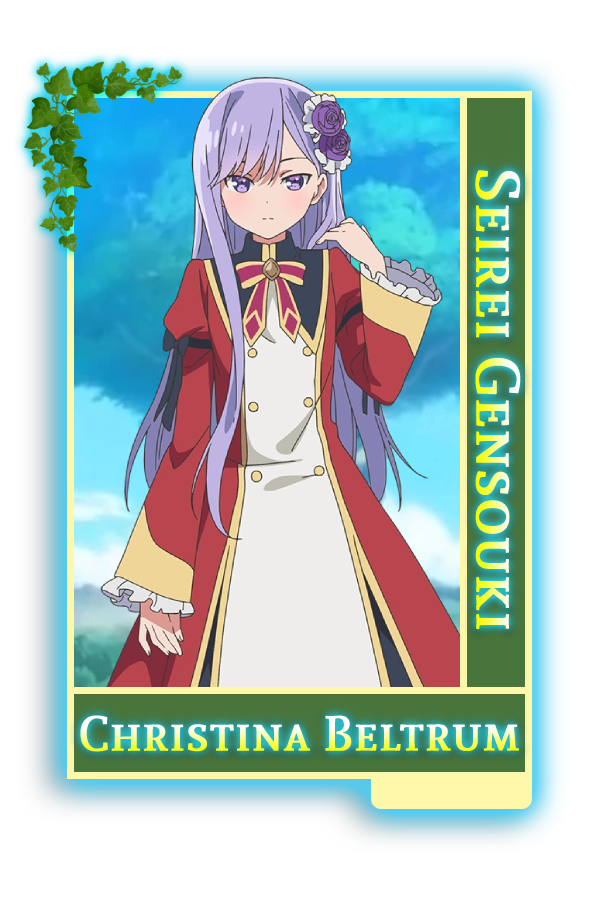
<style>
.page{position:relative;width:600px;height:900px}
.page>*{position:absolute;margin:0}
.t1{font:61px "AndadaSC-Regular";font-weight:bold}
.t2{font:49px "AndadaSC-Regular";font-weight:bold}
</style>
<div class="page">
<p class="t1" style="left:475px;top:170px;width:46px;height:460px;rotate:90deg">Seirei Gensouki</p>
<p class="t2" style="left:80px;top:715px;width:440px;height:37px">Christina Beltrum</p>
</div>
